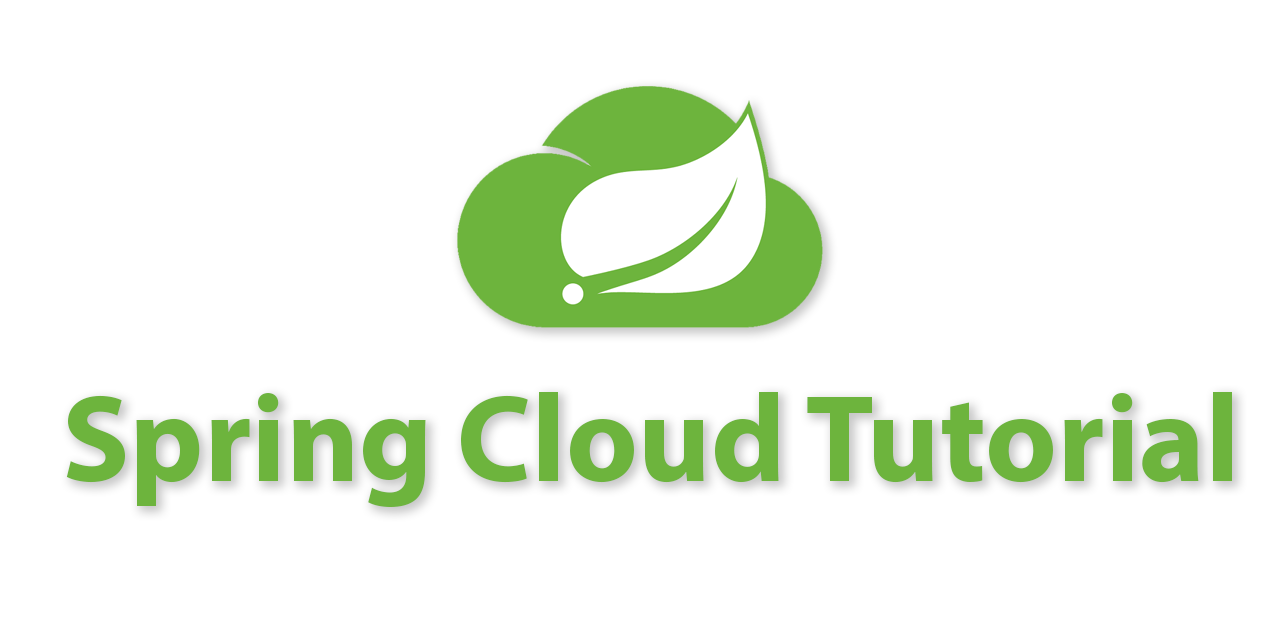
<style>
.page{position:relative;width:1280px;height:640px;background:#ffffff}
.page>*{position:absolute;margin:0}
.t1{font:125px "MyriadPro-Bold";color:#6db43d}
</style>
<div class="page">
<p class="t1" style="left:66px;top:392px;width:1166px;height:115px">Spring Cloud Tutorial</p>
</div>
